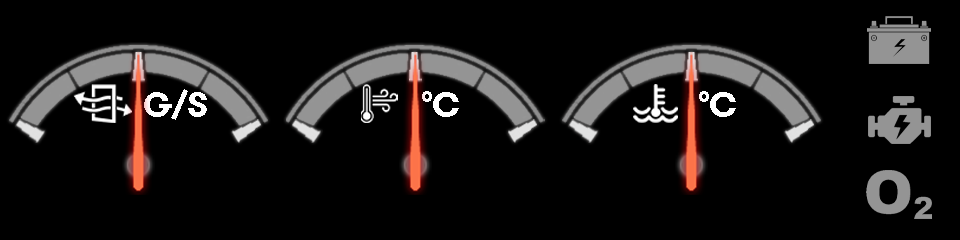
<style>
.page{position:relative;width:960px;height:240px;background:#000000}
.page>*{position:absolute;margin:0}
.t1{font:35.4px "GTWalsheimProBold";letter-spacing:-0.04em;color:#ffffff}
</style>
<div class="page">
<p class="t1" style="left:144px;top:89px;width:63px;height:31px">G/S</p>
<p class="t1" style="left:422px;top:91px;width:37px;height:26px">°C</p>
<p class="t1" style="left:699px;top:91px;width:37px;height:26px">°C</p>
</div>
